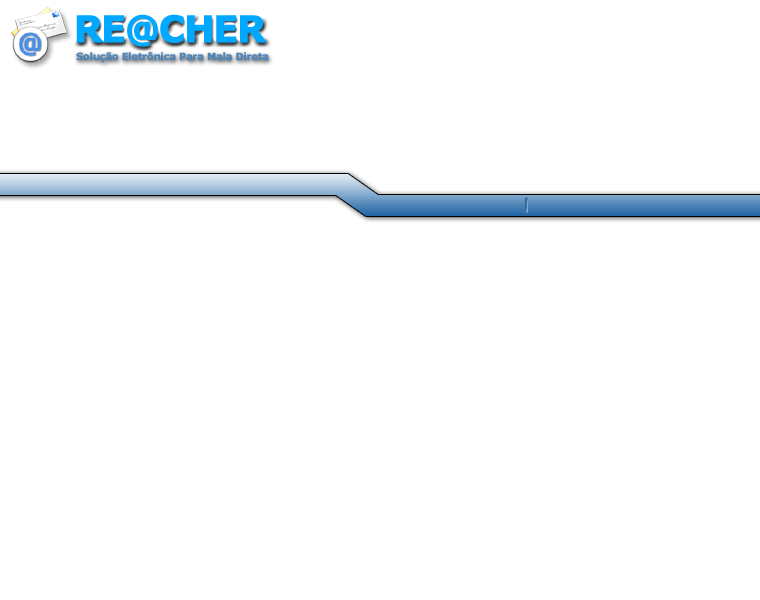
<style>
.page{position:relative;width:760px;height:600px;background:#ffffff}
.page>*{position:absolute;margin:0}
.t1{font:36px "Verdana-Bold";letter-spacing:-0.05em;color:#00a8ff;font-weight:bold}
.t2{font:10px "Verdana-Bold";letter-spacing:-0.05em;color:#4d84b7;font-weight:bold}
</style>
<div class="page">
<p class="t1" style="left:76px;top:14px;width:191px;height:33px">RE@CHER</p>
<p class="t2" style="left:76px;top:51px;width:193px;height:12px">Solução Eletrônica Para Mala Direta</p>
</div>
